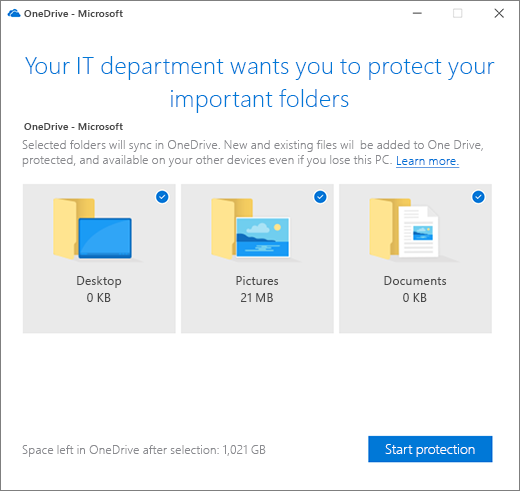
<style>
.page{position:relative;width:520px;height:491px;background:#ffffff}
.page>*{position:absolute;margin:0}
.t1{font:10.5px "SegoePro-Semibold";color:#494949}
.t2{font:24.5px "SegoePro-Light";letter-spacing:0.01em;color:#0078d7}
.t3{font:24.5px/32.8px "SegoePro-Light";letter-spacing:0.01em;color:#0078d7}
.t4{font:12.5px "SegoePro-Light";letter-spacing:0.01em;color:#8a8b8f}
.t5{font:12.5px "SegoePro-Light";letter-spacing:0.01em;color:#0071d5;text-decoration:underline}
.t6{font:12.5px/17.1px "SegoePro";letter-spacing:0.01em;color:#494949}
.t7{font:13.6px "SegoePro-Light";letter-spacing:0.01em;color:#ffffff}
</style>
<div class="page">
<p class="t1" style="left:24px;top:10px;width:99px;height:7px">OneDrive - Microsoft</p>
<p class="t2" style="left:25px;top:56px;width:470px;height:57px;text-align:center">Your IT department wants you to protect your<br><span class="t3">important folders</span></p>
<p class="t1" style="left:24px;top:123px;width:99px;height:7px">OneDrive - Microsoft</p>
<p class="t4" style="left:22px;top:140px;width:461px;height:27px">Selected folders will sync in OneDrive. New and existing files wil  be added to One Drive,<br>protected, and available on your other devices even if you lose this PC.</p>
<p class="t5" style="left:396px;top:156px;width:64px;height:12px">Learn more.</p>
<p class="t6" style="left:77px;top:276px;width:45px;height:26px;text-align:center">Desktop<br>0 KB</p>
<p class="t6" style="left:236px;top:276px;width:43px;height:26px;text-align:center">Pictures<br>21 MB</p>
<p class="t6" style="left:384px;top:276px;width:63px;height:26px;text-align:center">Documents<br>0 KB</p>
<p class="t4" style="left:22px;top:445px;width:244px;height:12px">Space left in OneDrive after selection: 1,021 GB</p>
<p class="t7" style="left:385px;top:444px;width:90px;height:13px">Start protection</p>
</div>
